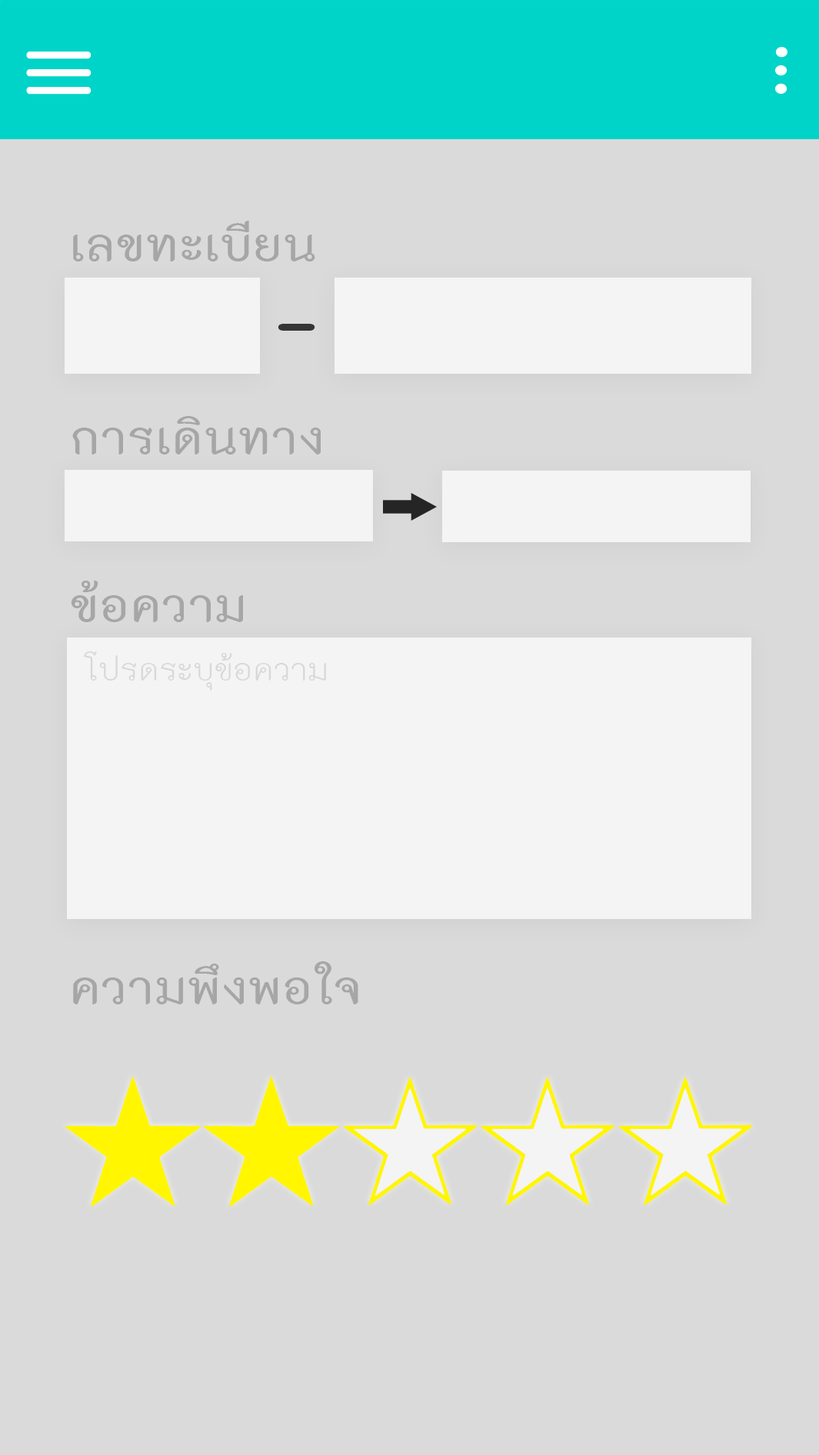
<style>
.page{position:relative;width:819px;height:1455px;background:#dadada}
.page>*{position:absolute;margin:0}
.t1{font:64.8px "THK2DJuly8-Bold";color:#a6a6a6;scale:1.07 1}
.t2{font:93.8px "THKodchasal-Bold";color:#353535;scale:1.3 1}
.t3{font:44.8px "THK2DJuly8";color:#d8d8d8;scale:1.05 1}
</style>
<div class="page">
<p class="t1" style="left:73px;top:221px;width:242px;height:41px">เลขทะเบียน</p>
<p class="t2" style="left:278px;top:324px;width:37px;height:7px">-</p>
<p class="t1" style="left:72px;top:416px;width:249px;height:39px">การเดินทาง</p>
<p class="t1" style="left:71px;top:581px;width:172px;height:41px">ข้อความ</p>
<p class="t3" style="left:84px;top:652px;width:242px;height:39px">โปรดระบุข้อความ</p>
<p class="t1" style="left:73px;top:962px;width:285px;height:43px">ความพึงพอใจ</p>
</div>
